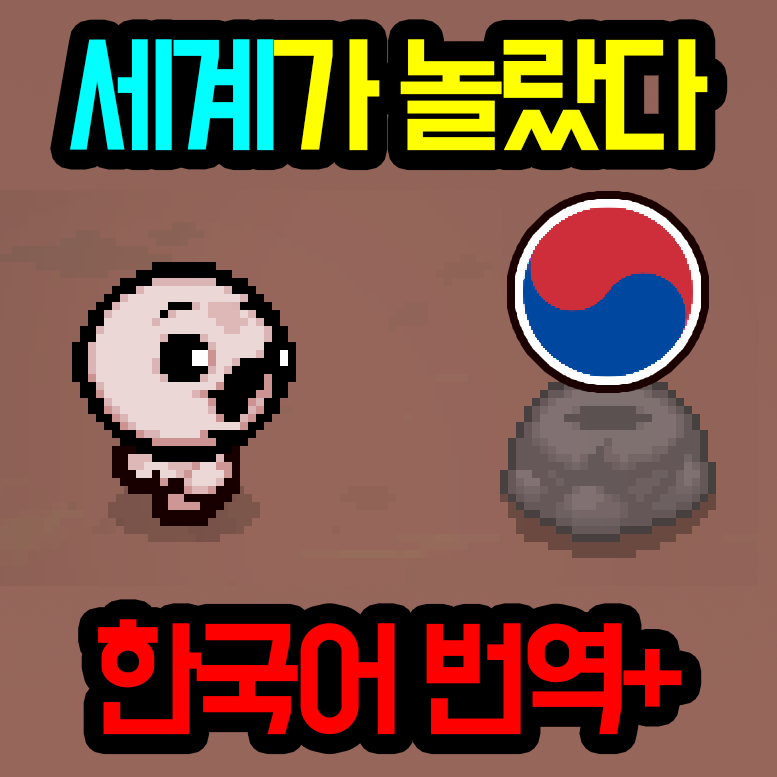
<style>
.page{position:relative;width:777px;height:777px}
.page>*{position:absolute;margin:0}
.t1{font:117px/146px "BMDoHyeon-OTF";letter-spacing:-0.1em;color:#ff0000}
.t2{font:117px/146px "BMDoHyeon-OTF";letter-spacing:-0.1em;color:#00ffff}
.t3{font:117px/146px "BMDoHyeon-OTF";letter-spacing:-0.1em;color:#ffff00}
</style>
<div class="page">
<p class="t1" style="left:70px;top:39px;width:638px;height:696px;text-align:center"><span class="t2">세계</span><span class="t3">가 놀랐다 <br></span><br><br><br>한국어 번역+</p>
</div>
